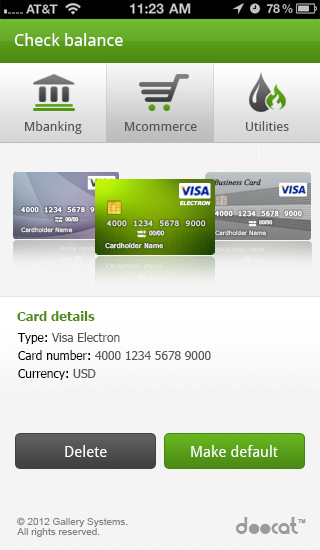
<style>
.page{position:relative;width:320px;height:550px;background:#f5f5f5}
.page>*{position:absolute;margin:0}
.t1{font:17px "DroidSans";color:#ffffff}
.t2{font:6.6px "Verdana";letter-spacing:0.04em;color:#ffffff}
.t3{font:5.2px "Verdana-Bold";color:#fffeff;font-style:italic}
.t4{font:2.5px/2.9px "ArialMT";color:#e6e6e6;font-weight:bold}
.t5{font:5px "ArialMT";color:#e4e4e4;font-weight:bold}
.t6{font:7.5px "Verdana";letter-spacing:0.04em;color:#e2e2e2}
.t7{font:5.8px "Verdana";color:#e5e5e5}
.t8{font:2.8px/3.3px "ArialMT";color:#ffffff;font-weight:bold}
.t9{font:5.6px "ArialMT";color:#e2e2e2;font-weight:bold}
.t10{font:6.6px "Verdana";color:#e2e2e2}
.t11{font:13px "Tahoma-Bold";color:#4e8c15}
.t12{font:12px/18px "Tahoma";color:#575757}
.t13{font:12px/18px "Tahoma";color:#000000}
.t14{font:15px "DroidSans";color:#ffffff}
.t15{font:10px/10px "ArialMT";color:#838383}
</style>
<div class="page">
<p class="t1" style="left:14px;top:33px;width:109px;height:13px">Check balance</p>
<p class="t2" style="left:21px;top:207px;width:87px;height:6px">4000  1234  5678  9000</p>
<p class="t3" style="left:179px;top:200px;width:32px;height:6px">ELECTRON</p>
<p class="t4" style="left:54px;top:217px;width:9px;height:6px">VALID<br>THRU</p>
<p class="t5" style="left:65px;top:217px;width:14px;height:5px">00/00</p>
<p class="t6" style="left:106px;top:220px;width:100px;height:7px">4000  1234  5678  9000</p>
<p class="t7" style="left:21px;top:227px;width:52px;height:6px">Cardholder Name</p>
<p class="t8" style="left:137px;top:230px;width:9px;height:8px">VALID<br>THRU</p>
<p class="t9" style="left:149px;top:230px;width:16px;height:6px">00/00</p>
<p class="t10" style="left:105px;top:242px;width:58px;height:7px">Cardholder Name</p>
<p class="t11" style="left:17px;top:311px;width:78px;height:10px">Card details</p>
<p class="t12" style="left:17px;top:332px;width:194px;height:48px"><span class="t13">Type:</span> Visa Electron<br><span class="t13">Card number:</span> 4000 1234 5678 9000<br><span class="t13">Currency:</span> USD</p>
<p class="t14" style="left:65px;top:445px;width:42px;height:12px">Delete</p>
<p class="t14" style="left:191px;top:445px;width:87px;height:12px">Make default</p>
<p class="t15" style="left:17px;top:517px;width:111px;height:20px">© 2012 Gallery Systems. <br>All rights reserved.</p>
</div>
